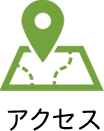
<style>
.page{position:relative;width:104px;height:131px;background:#ffffff}
.page>*{position:absolute;margin:0}
.t1{font:28px "TBChibiRGoPlusKPro-Regular";color:#000000}
</style>
<div class="page">
<p class="t1" style="left:7px;top:108px;width:93px;height:23px">アクセス</p>
</div>
